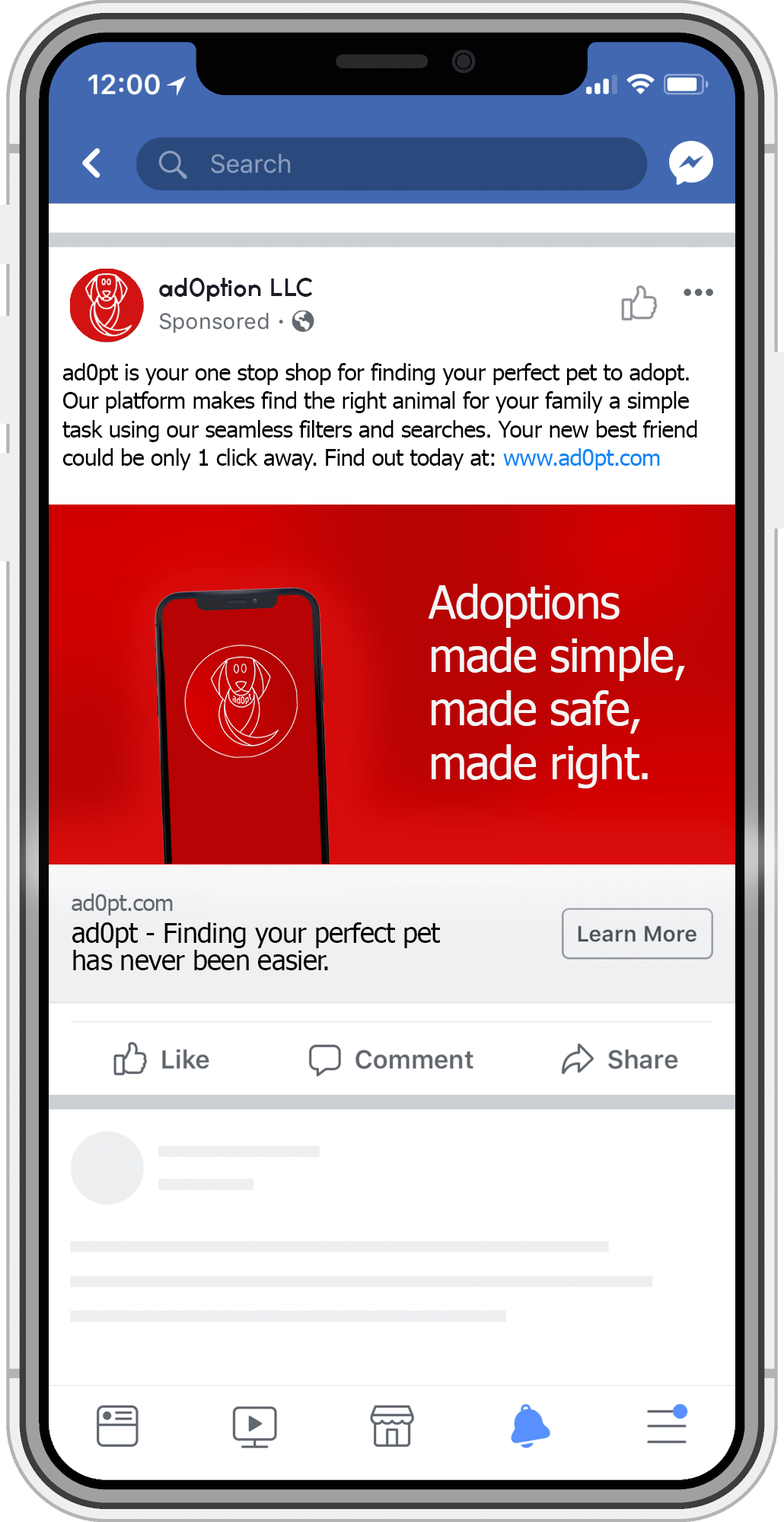
<style>
.page{position:relative;width:784px;height:1522px;background:#ffffff}
.page>*{position:absolute;margin:0}
.t1{font:22.8px "TYPOGRAPHPRO-SemiBold";letter-spacing:-0.02em;color:#191c24}
.t2{font:22.8px/28.5px "Tahoma";letter-spacing:-0.02em;color:#000000}
.t3{font:22.8px/28.5px "Tahoma";letter-spacing:-0.02em;color:#1086f3}
.t4{font:45.6px/53.6px "Tahoma";letter-spacing:-0.02em;color:#f5f5f5}
.t5{font:22.8px "Tahoma";letter-spacing:-0.02em;color:#636971}
.t6{font:27.4px "Tahoma";letter-spacing:-0.02em;color:#000000}
</style>
<div class="page">
<p class="t1" style="left:159px;top:278px;width:154px;height:23px">ad0ption LLC</p>
<p class="t2" style="left:62px;top:363px;width:635px;height:107px">ad0pt is your one stop shop for finding your perfect pet to adopt. Our platform makes find the right animal for your family a simple task using our seamless filters and searches. Your new best friend could be only 1 click away. Find out today at: <span class="t3">www.ad0pt.com</span></p>
<p class="t4" style="left:428px;top:584px;width:257px;height:204px">Adoptions made simple,<br>made safe,<br>made right.</p>
<p class="t5" style="left:72px;top:893px;width:101px;height:22px">ad0pt.com</p>
<p class="t6" style="left:72px;top:922px;width:368px;height:26px">ad0pt - Finding your perfect pet</p>
<p class="t6" style="left:73px;top:950px;width:255px;height:20px">has never been easier.</p>
</div>
